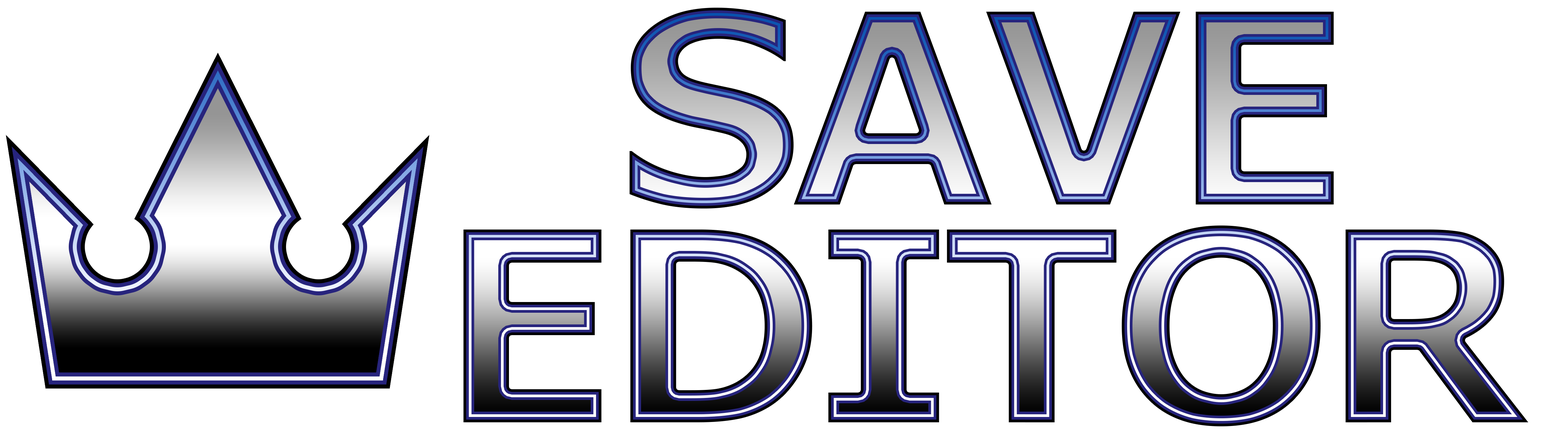
<style>
.page{position:relative;width:1568px;height:436px;background:#ffffff}
.page>*{position:absolute;margin:0}
.t1{font:272.2px/217.8px "Verdana-Bold";letter-spacing:-0.07em}
</style>
<div class="page">
<p class="t1" style="left:461px;top:5px;width:1073px;height:424px;text-align:center">SAVE<br>EDITOR</p>
</div>
